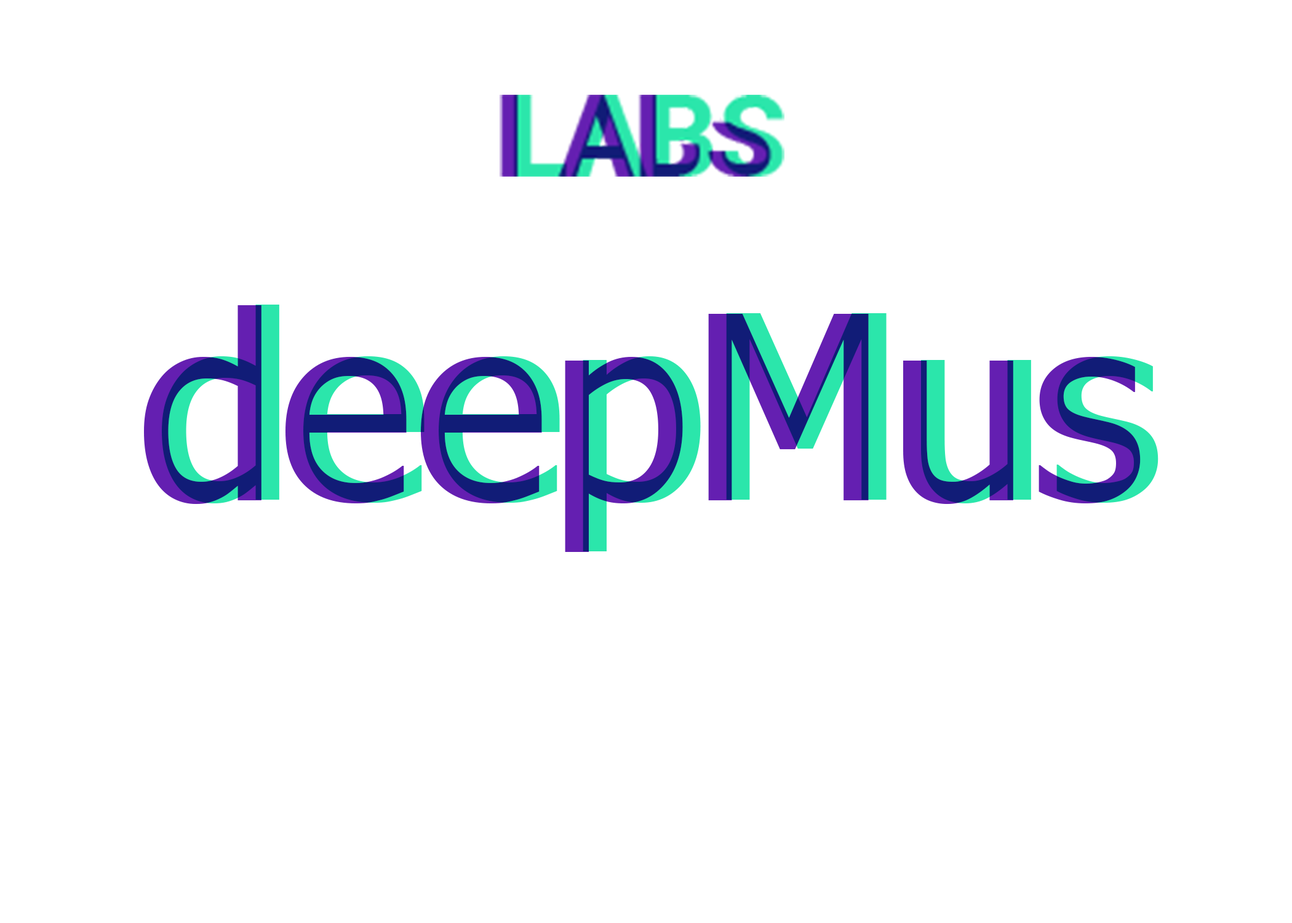
<style>
.page{position:relative;width:1292px;height:923px;background:#ffffff}
.page>*{position:absolute;margin:0}
.t1{font:256.4px "Tahoma"}
</style>
<div class="page">
<p class="t1" style="left:144px;top:305px;width:997px;height:247px">deepMus</p>
<p class="t1" style="left:162px;top:305px;width:997px;height:246px">deepMus</p>
</div>
